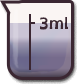
<style>
.page{position:relative;width:77px;height:84px}
.page>*{position:absolute;margin:0}
.t1{font:16px "OpenDyslexic-Bold";color:#3b2732}
</style>
<div class="page">
<p class="t1" style="left:40px;top:17px;width:28px;height:13px">3ml</p>
</div>
